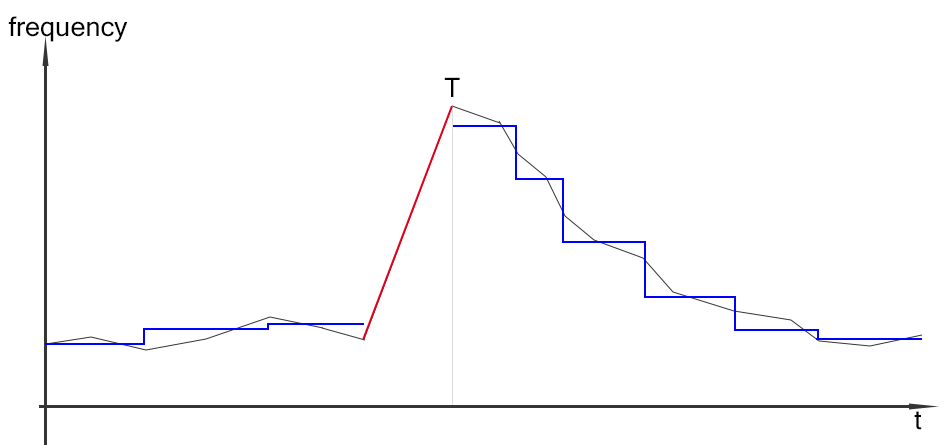
<style>
.page{position:relative;width:950px;height:445px;background:#ffffff}
.page>*{position:absolute;margin:0}
.t1{font:27px "MicrosoftSansSerif";color:#000000}
</style>
<div class="page">
<p class="t1" style="left:8px;top:16px;width:120px;height:26px">frequency</p>
<p class="t1" style="left:444px;top:77px;width:16px;height:20px">T</p>
<p class="t1" style="left:914px;top:411px;width:8px;height:19px">t</p>
</div>
